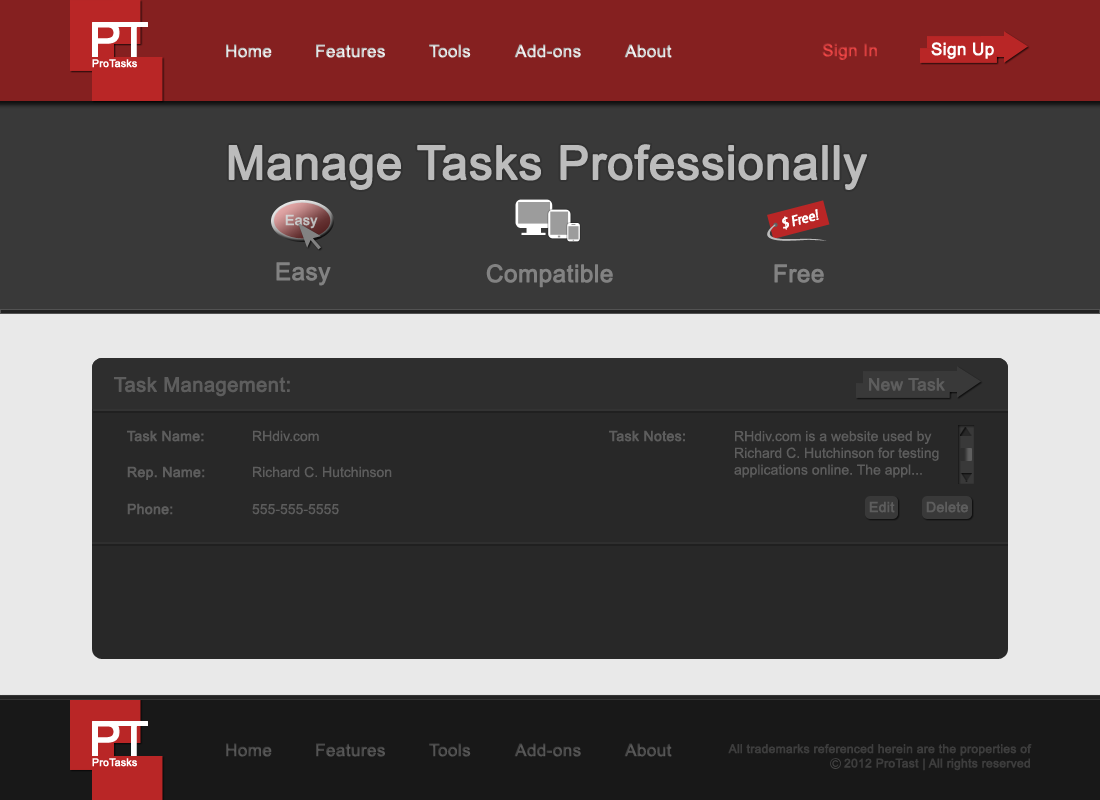
<style>
.page{position:relative;width:1100px;height:800px;background:#282828}
.page>*{position:absolute;margin:0}
.t1{font:17px "ArialMT";font-weight:bold}
.t2{font:17px "ArialMT";color:#ffffff;font-weight:bold}
.t3{font:10.5px "ArialMT";color:#ffffff;font-weight:bold}
.t4{font:47px "ArialMT";color:#bcbcbc;font-weight:bold}
.t5{font:14px "GouditaSansSFItalic";color:#ffffff;font-weight:bold}
.t6{font:14px "ArialMT";color:#c6c6c6;font-weight:bold}
.t7{font:24px "ArialMT";color:#828282;font-weight:bold}
.t8{font:20px "ArialMT";color:#5d5d5d;font-weight:bold}
.t9{font:17px "ArialMT";color:#5d5d5d;font-weight:bold}
.t10{font:14px "ArialMT";color:#5d5d5d;font-weight:bold}
.t11{font:14px "ArialMT";color:#5d5d5d}
.t12{font:17px "ArialMT";color:#4e4e4e;font-weight:bold}
.t13{font:17px "ArialMT";color:#4d4d4d;font-weight:bold}
.t14{font:17px "ArialMT";color:#4f4f4f;font-weight:bold}
.t15{font:12px "ArialMT";color:#3d3d3d;font-weight:bold}
</style>
<div class="page">
<p class="t1" style="left:226px;top:44px;width:46px;height:14px">Home</p>
<p class="t1" style="left:316px;top:44px;width:69px;height:14px">Features</p>
<p class="t1" style="left:429px;top:44px;width:42px;height:14px">Tools</p>
<p class="t1" style="left:514px;top:44px;width:67px;height:14px">Add-ons</p>
<p class="t1" style="left:624px;top:44px;width:48px;height:14px">About</p>
<p class="t1" style="left:822px;top:43px;width:55px;height:17px">Sign In</p>
<p class="t2" style="left:931px;top:42px;width:63px;height:17px">Sign Up</p>
<p class="t3" style="left:92px;top:59px;width:45px;height:9px">ProTasks</p>
<p class="t4" style="left:228px;top:144px;width:639px;height:46px">Manage Tasks Professionally</p>
<p class="t5" style="left:791px;top:209px;width:28px;height:18px;rotate:-15deg">Free!</p>
<p class="t6" style="left:285px;top:214px;width:33px;height:15px">Easy</p>
<p class="t5" style="left:782px;top:216px;width:7px;height:14px;rotate:-15deg">$</p>
<p class="t7" style="left:276px;top:262px;width:55px;height:24px">Easy</p>
<p class="t7" style="left:486px;top:264px;width:127px;height:24px">Compatible</p>
<p class="t7" style="left:774px;top:264px;width:50px;height:19px">Free</p>
<p class="t8" style="left:114px;top:377px;width:176px;height:20px">Task Management:</p>
<p class="t9" style="left:869px;top:378px;width:76px;height:13px">New Task</p>
<p class="t10" style="left:127px;top:430px;width:77px;height:12px">Task Name:</p>
<p class="t11" style="left:253px;top:430px;width:66px;height:12px">RHdiv.com</p>
<p class="t10" style="left:609px;top:430px;width:76px;height:12px">Task Notes:</p>
<p class="t11" style="left:734px;top:431px;width:205px;height:47px">RHdiv.com is a website used by Richard C. Hutchinson for testing applications online. The appl...</p>
<p class="t10" style="left:127px;top:466px;width:78px;height:14px">Rep. Name:</p>
<p class="t11" style="left:253px;top:466px;width:139px;height:12px">Richard C. Hutchinson</p>
<p class="t10" style="left:127px;top:503px;width:46px;height:12px">Phone:</p>
<p class="t11" style="left:252px;top:504px;width:87px;height:11px">555-555-5555</p>
<p class="t10" style="left:869px;top:501px;width:26px;height:12px">Edit</p>
<p class="t10" style="left:926px;top:501px;width:42px;height:12px">Delete</p>
<p class="t12" style="left:226px;top:743px;width:46px;height:14px">Home</p>
<p class="t12" style="left:316px;top:743px;width:69px;height:14px">Features</p>
<p class="t13" style="left:429px;top:743px;width:42px;height:14px">Tools</p>
<p class="t14" style="left:514px;top:743px;width:67px;height:14px">Add-ons</p>
<p class="t14" style="left:624px;top:743px;width:48px;height:14px">About</p>
<p class="t15" style="left:728px;top:744px;width:304px;height:27px;text-align:right">All trademarks referenced herein are the properties of<br>2012 ProTast | All rights reserved</p>
<p class="t3" style="left:92px;top:758px;width:45px;height:9px">ProTasks</p>
</div>
